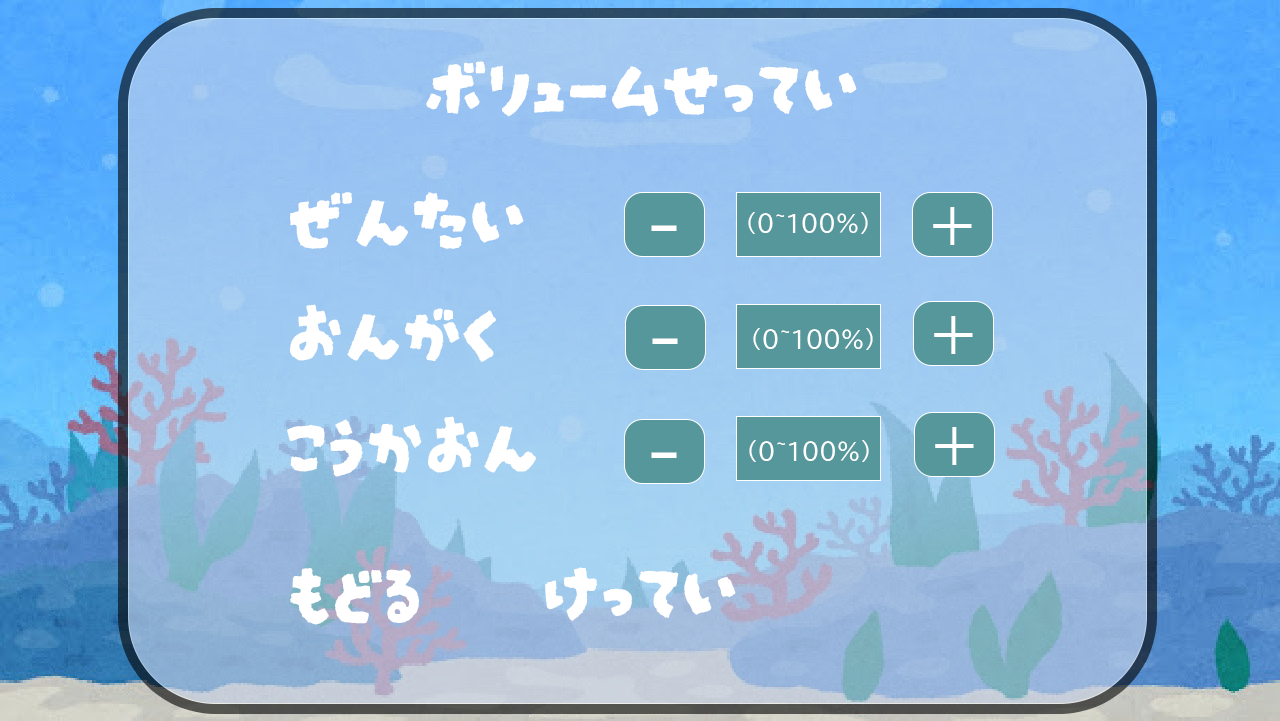
<style>
.page{position:relative;width:1280px;height:721px}
.page>*{position:absolute;margin:0}
.t1{font:75px "DarumadropOne-Regular";color:#ffffff}
.t2{font:58.3px "BIZ-UDPGothic";color:#ffffff}
.t3{font:23.2px "BIZ-UDPGothic";color:#ffffff}
.t4{font:75px "BIZ-UDPGothic";color:#ffffff}
</style>
<div class="page">
<p class="t1" style="left:426px;top:61px;width:431px;height:56px">ボリュームせってい</p>
<p class="t1" style="left:290px;top:192px;width:234px;height:57px">ぜんたい</p>
<p class="t2" style="left:933px;top:207px;width:39px;height:38px">+</p>
<p class="t3" style="left:748px;top:212px;width:120px;height:22px">(0~100%)</p>
<p class="t4" style="left:651px;top:225px;width:26px;height:6px">-</p>
<p class="t1" style="left:290px;top:304px;width:206px;height:58px">おんがく</p>
<p class="t2" style="left:934px;top:316px;width:39px;height:38px">+</p>
<p class="t3" style="left:753px;top:328px;width:120px;height:22px">(0~100%)</p>
<p class="t4" style="left:652px;top:338px;width:26px;height:6px">-</p>
<p class="t1" style="left:287px;top:416px;width:249px;height:61px">こうかおん</p>
<p class="t2" style="left:935px;top:427px;width:39px;height:38px">+</p>
<p class="t3" style="left:749px;top:440px;width:120px;height:22px">(0~100%)</p>
<p class="t4" style="left:651px;top:452px;width:26px;height:6px">-</p>
<p class="t1" style="left:290px;top:567px;width:130px;height:58px">もどる</p>
<p class="t1" style="left:545px;top:567px;width:191px;height:54px">けってい</p>
</div>
